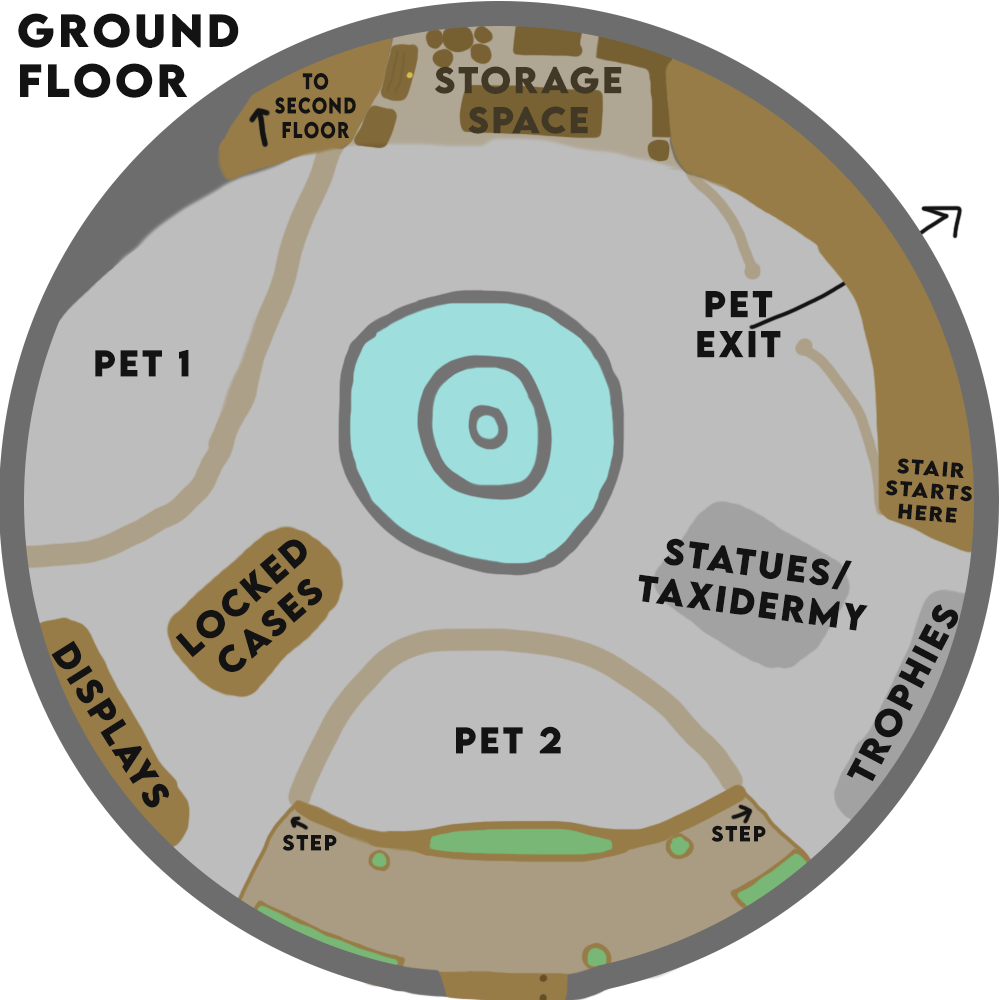
<style>
.page{position:relative;width:1000px;height:1000px;background:#bdbdbd}
.page>*{position:absolute;margin:0}
.t1{font:41.7px "LEMONMILK-Bold";letter-spacing:0.075em;color:#131313}
.t2{font:20.3px "LEMONMILK-Bold";letter-spacing:0.075em;color:#131313;scale:0.82 1}
.t3{font:33.3px "LEMONMILK-Bold";letter-spacing:0.075em;color:#413825}
.t4{font:33.3px "LEMONMILK-Bold";letter-spacing:0.075em;color:#131313}
.t5{font:18.9px "LEMONMILK-Bold";letter-spacing:0.075em;color:#131313;scale:1.06 1}
.t6{font:19.6px "LEMONMILK-Bold";letter-spacing:0.075em;color:#131313}
</style>
<div class="page">
<p class="t1" style="left:18px;top:13px;width:221px;height:85px">ground<br>floor</p>
<p class="t2" style="left:275px;top:73px;width:81px;height:66px;text-align:center">to second floor</p>
<p class="t3" style="left:435px;top:66px;width:187px;height:68px;text-align:center">storage<br>space</p>
<p class="t4" style="left:697px;top:291px;width:84px;height:67px;text-align:center">pet<br>exit</p>
<p class="t4" style="left:95px;top:350px;width:94px;height:27px">pet 1</p>
<p class="t5" style="left:885px;top:458px;width:87px;height:65px;text-align:center;rotate:4deg">stair<br>starts<br>here</p>
<p class="t4" style="left:175px;top:539px;width:148px;height:133px;text-align:center;rotate:-41deg">locked<br>cases</p>
<p class="t4" style="left:638px;top:538px;width:230px;height:93px;text-align:center;rotate:8deg">statues/<br>taxidermy</p>
<p class="t4" style="left:846px;top:604px;width:113px;height:178px;rotate:-62deg">trophies</p>
<p class="t4" style="left:51px;top:640px;width:118px;height:168px;rotate:58deg">displays</p>
<p class="t4" style="left:456px;top:726px;width:105px;height:28px">pet 2</p>
<p class="t6" style="left:711px;top:825px;width:55px;height:17px">step</p>
<p class="t6" style="left:282px;top:834px;width:55px;height:17px">step</p>
</div>
